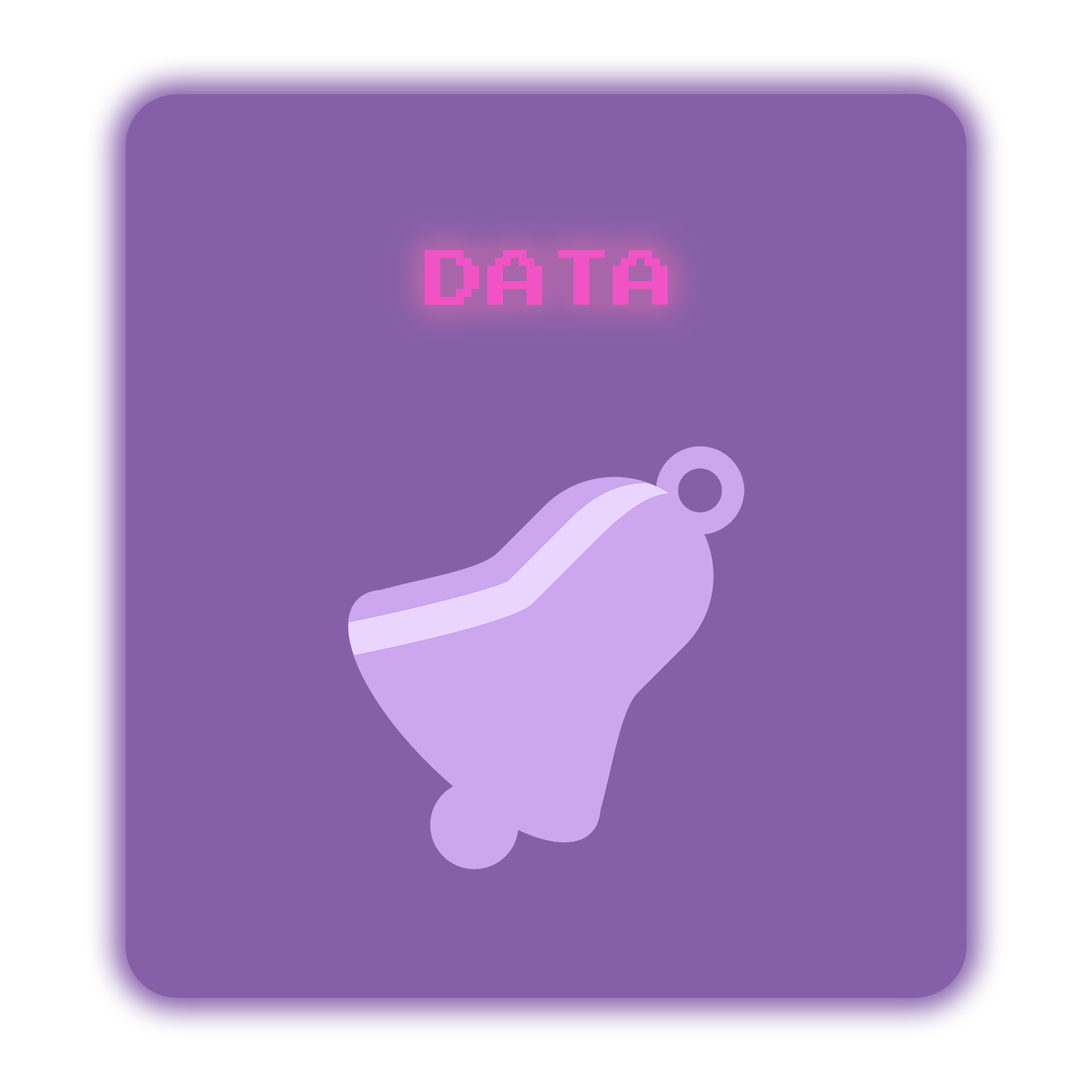
<style>
.page{position:relative;width:1092px;height:1092px;background:#8560a8}
.page>*{position:absolute;margin:0}
.t1{font:62.7px "PressStart2P-Regular";color:#f153c5}
</style>
<div class="page">
<p class="t1" style="left:425px;top:250px;width:243px;height:55px">DATA</p>
</div>
